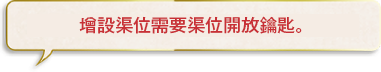
<style>
.page{position:relative;width:381px;height:72px;background:#f5ece4}
.page>*{position:absolute;margin:0}
.t1{font:18px "GothicMB101Pr6N-Medium";color:#c83036}
</style>
<div class="page">
<p class="t1" style="left:79px;top:16px;width:223px;height:18px">增設渠位需要渠位開放鑰匙。</p>
</div>
